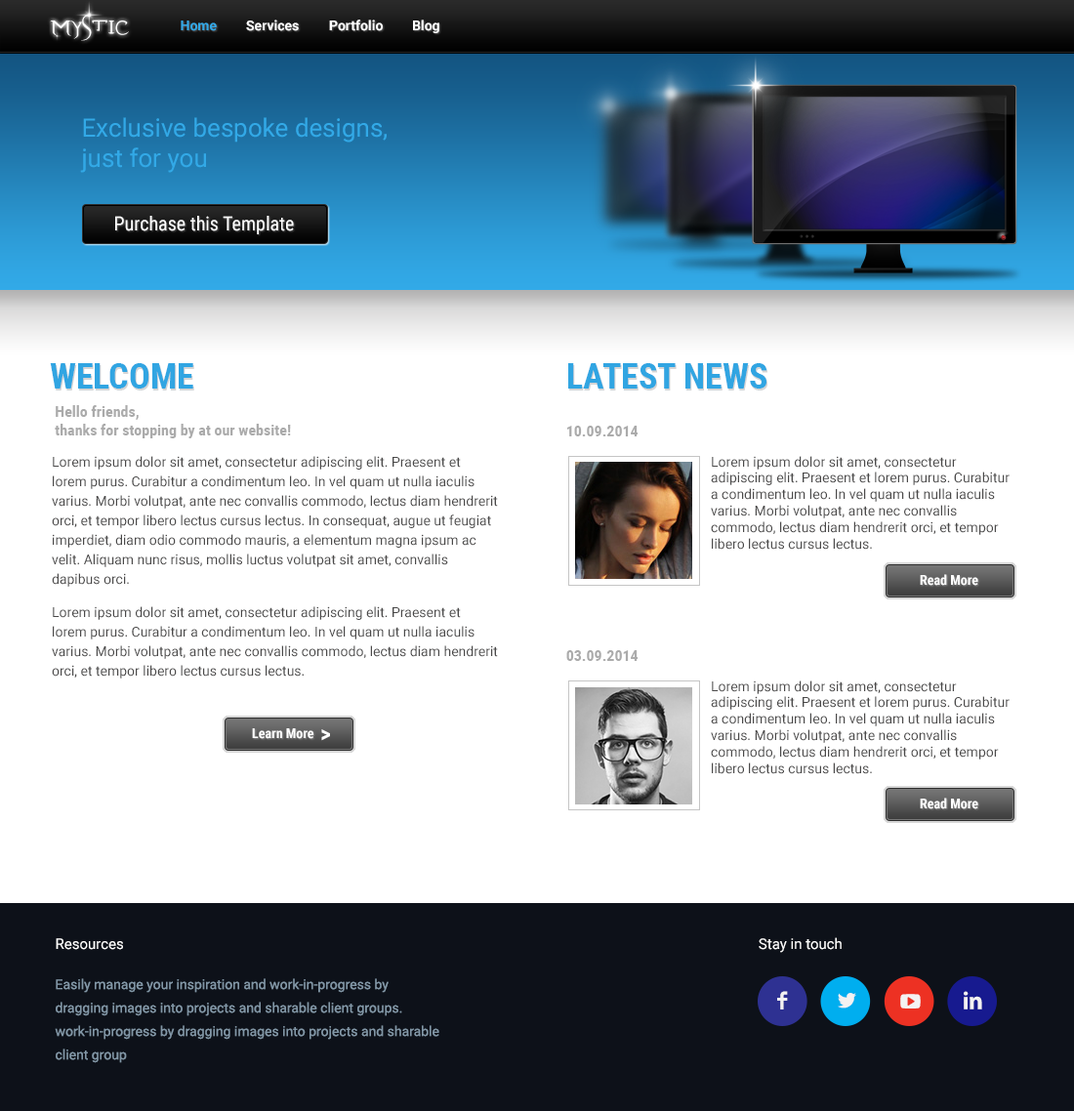
<style>
.page{position:relative;width:1074px;height:1111px;background:#ffffff}
.page>*{position:absolute;margin:0}
.t1{font:36.7px "Evanescent";color:#ffffff}
.t2{font:13.7px "Roboto-Bold";color:#32a9e7}
.t3{font:13.7px "Roboto-Bold";color:#ffffff}
.t4{font:25.4px "Roboto-Regular";color:#32a9e7}
.t5{font:19.5px "RobotoCondensed-Regular";color:#ffffff}
.t6{font:35.1px "RobotoCondensed-Bold";color:#31a5e2}
.t7{font:15.6px/19px "RobotoCondensed-Bold";color:#ababab}
.t8{font:15.6px "RobotoCondensed-Bold";color:#ababab}
.t9{font:13.7px/19.5px "Roboto-Regular";color:#4a4949}
.t10{font:13.7px "Roboto-Regular";color:#4a4949}
.t11{font:13.7px "RobotoCondensed-Bold";color:#ffffff}
.t12{font:23.4px "RobotoCondensed-Bold";color:#ffffff}
.t13{font:14.6px "Roboto-Regular";color:#ffffff}
.t14{font:13.7px/23.4px "Roboto-Regular";color:#8297a7}
</style>
<div class="page">
<p class="t1" style="left:50px;top:15px;width:79px;height:26px">mystic</p>
<p class="t2" style="left:181px;top:20px;width:36px;height:11px">Home</p>
<p class="t3" style="left:246px;top:20px;width:53px;height:11px">Services</p>
<p class="t3" style="left:329px;top:20px;width:54px;height:11px">Portfolio</p>
<p class="t3" style="left:413px;top:20px;width:26px;height:13px">Blog</p>
<p class="t4" style="left:80px;top:117px;width:306px;height:56px">Exclusive bespoke designs,<br>just for you</p>
<p class="t5" style="left:115px;top:216px;width:179px;height:18px">Purchase this Template</p>
<p class="t6" style="left:50px;top:363px;width:143px;height:25px">WELCOME</p>
<p class="t6" style="left:568px;top:363px;width:199px;height:25px">LATEST NEWS</p>
<p class="t7" style="left:55px;top:405px;width:236px;height:33px">Hello friends,<br> thanks for stopping by at our website!</p>
<p class="t8" style="left:567px;top:426px;width:70px;height:10px">10.09.2014</p>
<p class="t9" style="left:52px;top:456px;width:446px;height:131px">Lorem ipsum dolor sit amet, consectetur adipiscing elit. Praesent et lorem purus. Curabitur a condimentum leo. In vel quam ut nulla iaculis varius. Morbi volutpat, ante nec convallis commodo, lectus diam hendrerit orci, et tempor libero lectus cursus lectus. In consequat, augue ut feugiat imperdiet, diam odio commodo mauris, a elementum magna ipsum ac velit. Aliquam nunc risus, mollis luctus volutpat sit amet, convallis dapibus orci.</p>
<p class="t10" style="left:711px;top:456px;width:298px;height:93px">Lorem ipsum dolor sit amet, consectetur adipiscing elit. Praesent et lorem purus. Curabitur a condimentum leo. In vel quam ut nulla iaculis varius. Morbi volutpat, ante nec convallis commodo, lectus diam hendrerit orci, et tempor libero lectus cursus lectus.</p>
<p class="t11" style="left:919px;top:574px;width:59px;height:12px">Read More</p>
<p class="t9" style="left:52px;top:606px;width:446px;height:72px">Lorem ipsum dolor sit amet, consectetur adipiscing elit. Praesent et lorem purus. Curabitur a condimentum leo. In vel quam ut nulla iaculis varius. Morbi volutpat, ante nec convallis commodo, lectus diam hendrerit orci, et tempor libero lectus cursus lectus.</p>
<p class="t8" style="left:566px;top:650px;width:71px;height:11px">03.09.2014</p>
<p class="t10" style="left:711px;top:680px;width:298px;height:94px">Lorem ipsum dolor sit amet, consectetur adipiscing elit. Praesent et lorem purus. Curabitur a condimentum leo. In vel quam ut nulla iaculis varius. Morbi volutpat, ante nec convallis commodo, lectus diam hendrerit orci, et tempor libero lectus cursus lectus.</p>
<p class="t11" style="left:252px;top:728px;width:61px;height:11px">Learn More</p>
<p class="t12" style="left:321px;top:729px;width:9px;height:12px">&gt;</p>
<p class="t11" style="left:919px;top:797px;width:59px;height:12px">Read More</p>
<p class="t13" style="left:56px;top:938px;width:67px;height:12px">Resources</p>
<p class="t13" style="left:758px;top:937px;width:83px;height:16px">Stay in touch</p>
<p class="t14" style="left:55px;top:978px;width:384px;height:85px">Easily manage your inspiration and work-in-progress by dragging images into projects and sharable client groups. work-in-progress by dragging images into projects and sharable client group</p>
</div>
